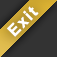
<style>
.page{position:relative;width:57px;height:57px;background:#333333}
.page>*{position:absolute;margin:0}
.t1{font:16px "Arial-BoldMT";letter-spacing:0.1em;color:#ffffff}
</style>
<div class="page">
<p class="t1" style="left:7px;top:6px;width:32px;height:31px;rotate:-45deg">Exit</p>
</div>
